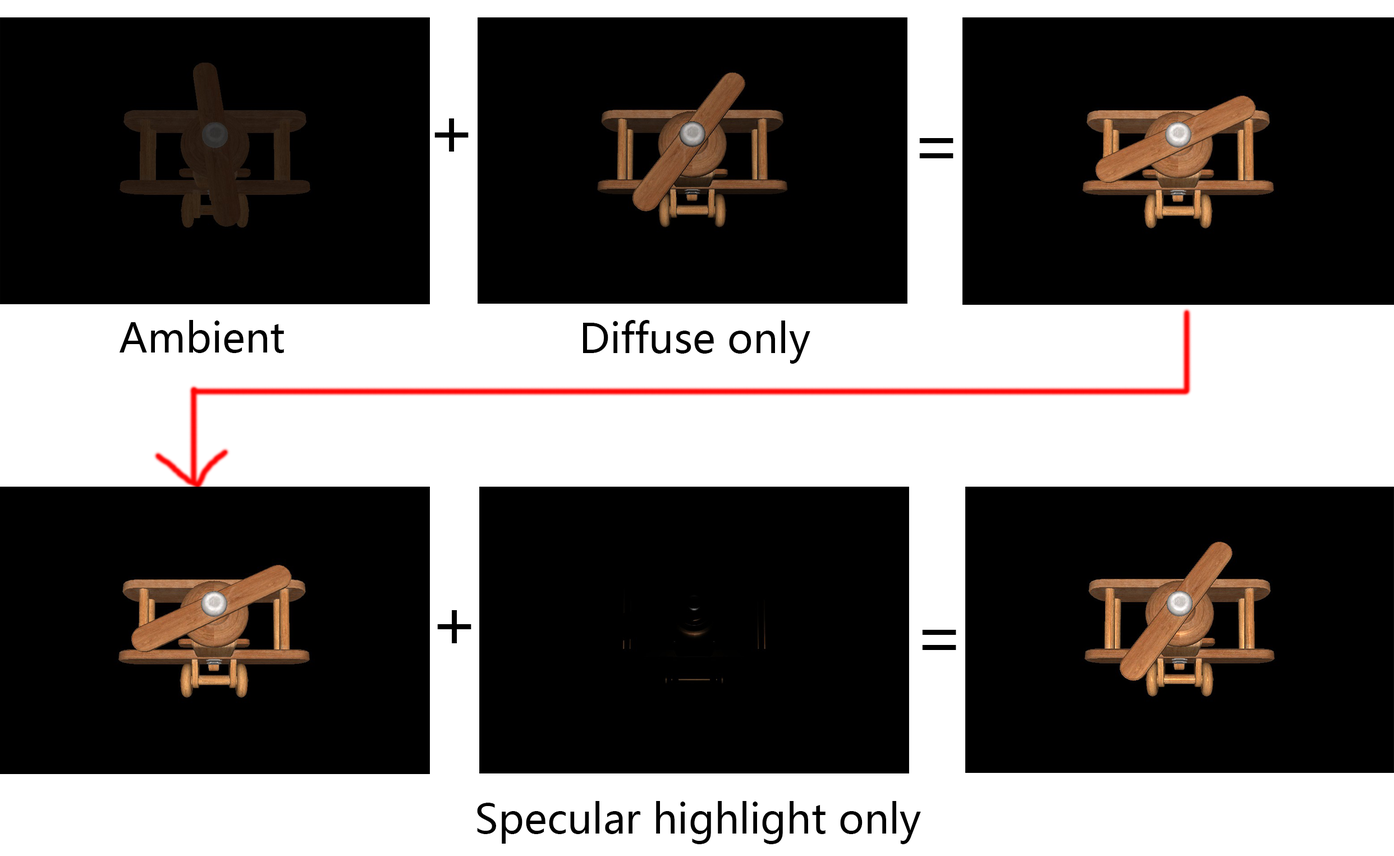
<style>
.page{position:relative;width:1394px;height:856px;background:#000000}
.page>*{position:absolute;margin:0}
.t1{font:67.3px "MicrosoftYaHei";color:#000000}
.t2{font:40.4px "MicrosoftYaHei";color:#000000}
</style>
<div class="page">
<p class="t1" style="left:434px;top:118px;width:34px;height:33px">+</p>
<p class="t1" style="left:919px;top:138px;width:34px;height:20px">=</p>
<p class="t2" style="left:119px;top:320px;width:165px;height:33px">Ambient</p>
<p class="t2" style="left:583px;top:320px;width:227px;height:44px">Diffuse only</p>
<p class="t1" style="left:437px;top:610px;width:34px;height:33px">+</p>
<p class="t1" style="left:922px;top:630px;width:34px;height:20px">=</p>
<p class="t2" style="left:477px;top:801px;width:444px;height:43px">Specular highlight only</p>
</div>
